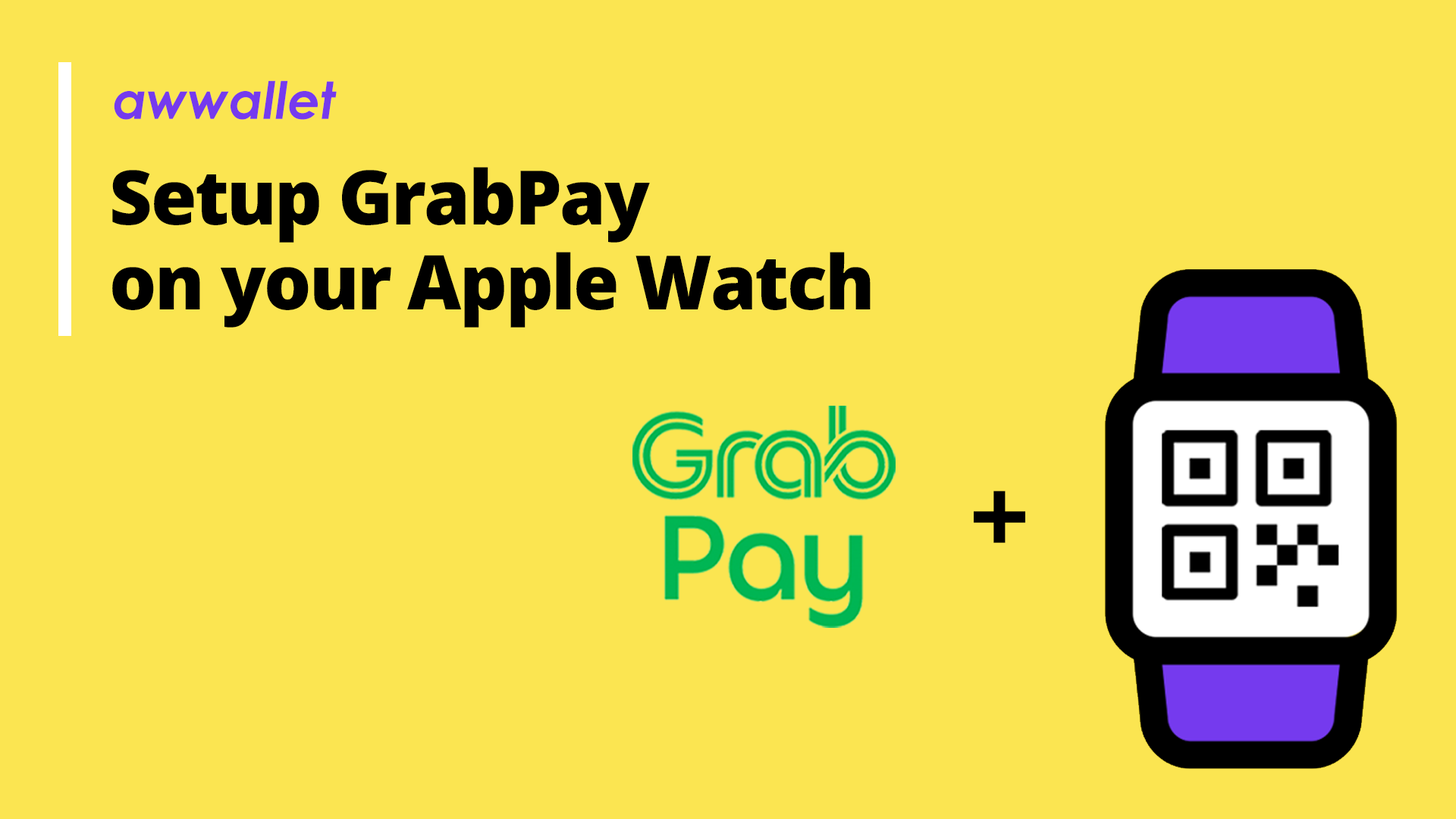
<style>
.page{position:relative;width:1456px;height:819px;background:#fbe551}
.page>*{position:absolute;margin:0}
.t1{font:51.4px "CenturyGothic-BoldItalic";color:#753aee}
.t2{font:75.2px/84.8px "OpenSansRoman-ExtraBold";letter-spacing:-0.025em;color:#000000}
.t3{font:106.2px "OpenSansRoman-Bold";letter-spacing:-0.025em;color:#000000}
</style>
<div class="page">
<p class="t1" style="left:114px;top:80px;width:223px;height:40px">awwallet</p>
<p class="t2" style="left:112px;top:167px;width:759px;height:161px">Setup GrabPay<br>on your Apple Watch</p>
<p class="t3" style="left:974px;top:491px;width:51px;height:52px">+</p>
</div>
